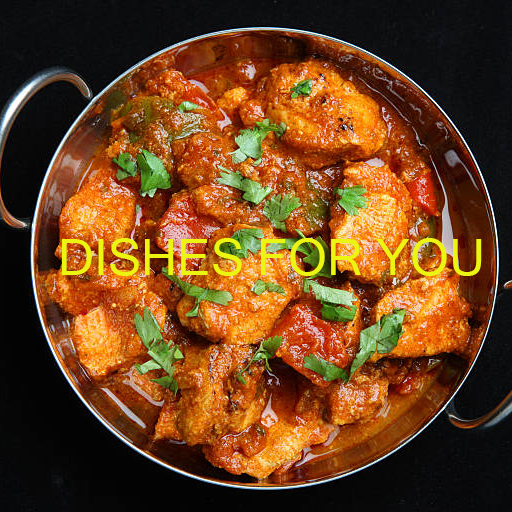
<style>
.page{position:relative;width:512px;height:512px}
.page>*{position:absolute;margin:0}
.t1{font:50px "MicrosoftSansSerif";color:#ecf411}
</style>
<div class="page">
<p class="t1" style="left:62px;top:238px;width:420px;height:38px">DISHES FOR YOU</p>
</div>
